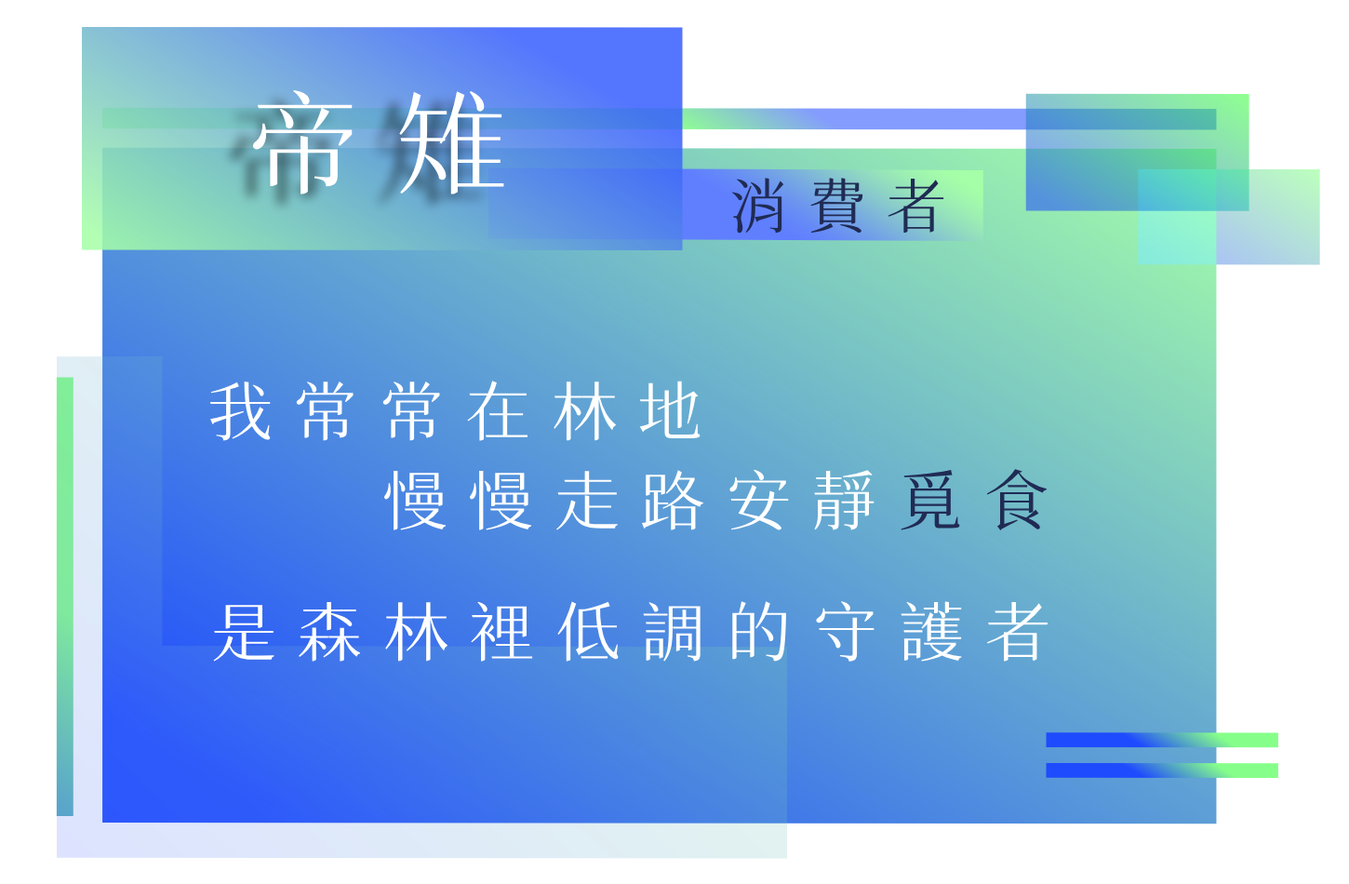
<style>
.page{position:relative;width:1349px;height:884px;background:#ffffff}
.page>*{position:absolute;margin:0}
.t1{font:111.6px "SweiSpringCJKtc-Regular";letter-spacing:0.32em;color:#ffffff;text-transform:uppercase}
.t2{font:59.5px "SweiSpringCJKtc-Regular";letter-spacing:0.32em;color:#202b54;text-transform:uppercase}
.t3{font:65.1px "SweiSpringCJKtc-Regular";letter-spacing:0.32em;color:#ffffff;text-transform:uppercase}
.t4{font:65.1px "SweiSpringCJKtc-Regular";letter-spacing:0.32em;color:#202b54;text-transform:uppercase}
</style>
<div class="page">
<p class="t1" style="left:252px;top:89px;width:252px;height:105px">帝雉</p>
<p class="t2" style="left:731px;top:178px;width:213px;height:56px">消費者</p>
<p class="t3" style="left:209px;top:381px;width:492px;height:60px">我常常在林地</p>
<p class="t3" style="left:383px;top:469px;width:664px;height:62px">慢慢走路安靜<span class="t4">覓食</span></p>
<p class="t3" style="left:213px;top:601px;width:835px;height:61px">是森林裡低調的守護者</p>
</div>
